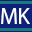
<style>
.page{position:relative;width:32px;height:32px;background:#0e2179}
.page>*{position:absolute;margin:0}
.t1{font:22.8px "MyriadPro-Regular";color:#ffffff}
</style>
<div class="page">
<p class="t1" style="left:1px;top:8px;width:29px;height:16px">MK</p>
</div>
